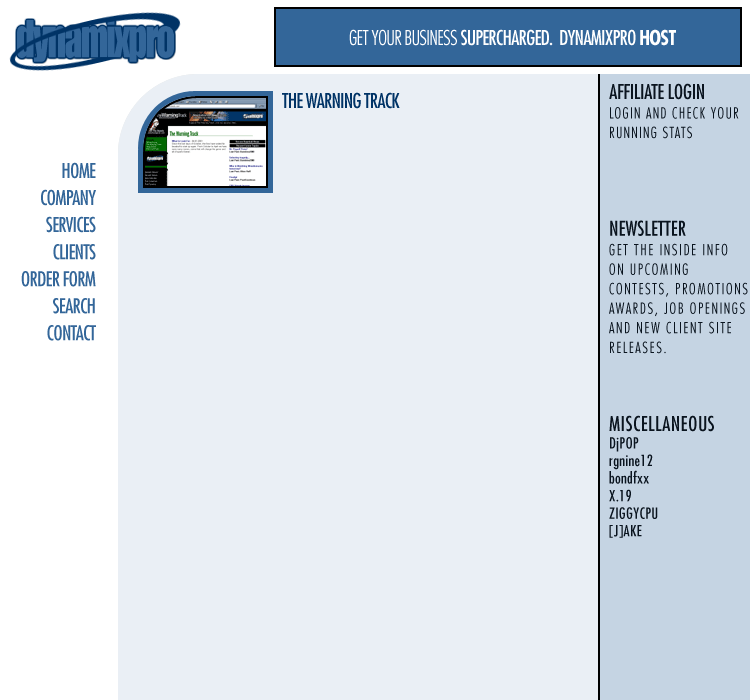
<style>
.page{position:relative;width:750px;height:700px;background:#eaeff5}
.page>*{position:absolute;margin:0}
.t1{font:20px "Futura-Condensed";letter-spacing:-0.04em;color:#ffffff}
.t2{font:20px "Futura-CondensedLight";letter-spacing:-0.04em;color:#ffffff}
.t3{font:20px "Futura-CondensedBold";letter-spacing:-0.04em;color:#ffffff}
.t4{font:15px/19.5px "Futura-CondensedLight";letter-spacing:0.1em;color:#0a141f}
.t5{font:20px/13.5px "Futura-Condensed";letter-spacing:-0.02em;color:#0a141f}
.t6{font:15px/19.5px "Futura-CondensedLight";letter-spacing:0.08em;color:#0a141f}
.t7{font:20px/19.5px "Futura-Condensed";color:#0a141f}
.t8{font:20px/19.5px "Futura-Condensed";letter-spacing:0.02em;color:#0a141f}
.t9{font:15px/17.5px "Futura-Condensed";letter-spacing:0.02em;color:#0a141f}
.t10{font:20px "Futura-Condensed";letter-spacing:-0.04em;color:#003366}
.t11{font:20px/13.5px "Futura-Condensed";letter-spacing:-0.04em;color:#336699}
</style>
<div class="page">
<p class="t1" style="left:349px;top:29px;width:327px;height:17px"><span class="t2">GET YOUR BUSINESS</span> SUPERCHARGED.  DYNAMIXPRO <span class="t3">HOST</span></p>
<p class="t4" style="left:609px;top:83px;width:139px;height:455px"><span class="t5">AFFILIATE LOGIN<br></span><span class="t6">LOGIN AND CHECK YOUR<br>RUNNING STATS<br><br><br><br><br></span><span class="t7">NEWSLETTER<br></span>GET THE INSIDE INFO <br>ON UPCOMING <br>CONTESTS, PROMOTIONS<br>AWARDS, JOB OPENINGS<br>AND NEW CLIENT SITE <br>RELEASES.<br><br><br><br><span class="t8">MISCELLANEOUS<br></span><span class="t9">DjPOP<br>rgnine12<br>bondfxx<br>X.19<br>ZIGGYCPU<br>[J]AKE</span></p>
<p class="t10" style="left:282px;top:92px;width:118px;height:17px">THE WARNING TRACK</p>
<p class="t11" style="left:21px;top:162px;width:75px;height:179px;text-align:right">HOME<br><br>COMPANY<br><br>SERVICES<br><br>CLIENTS<br><br>ORDER FORM<br><br>SEARCH<br><br>CONTACT</p>
</div>
